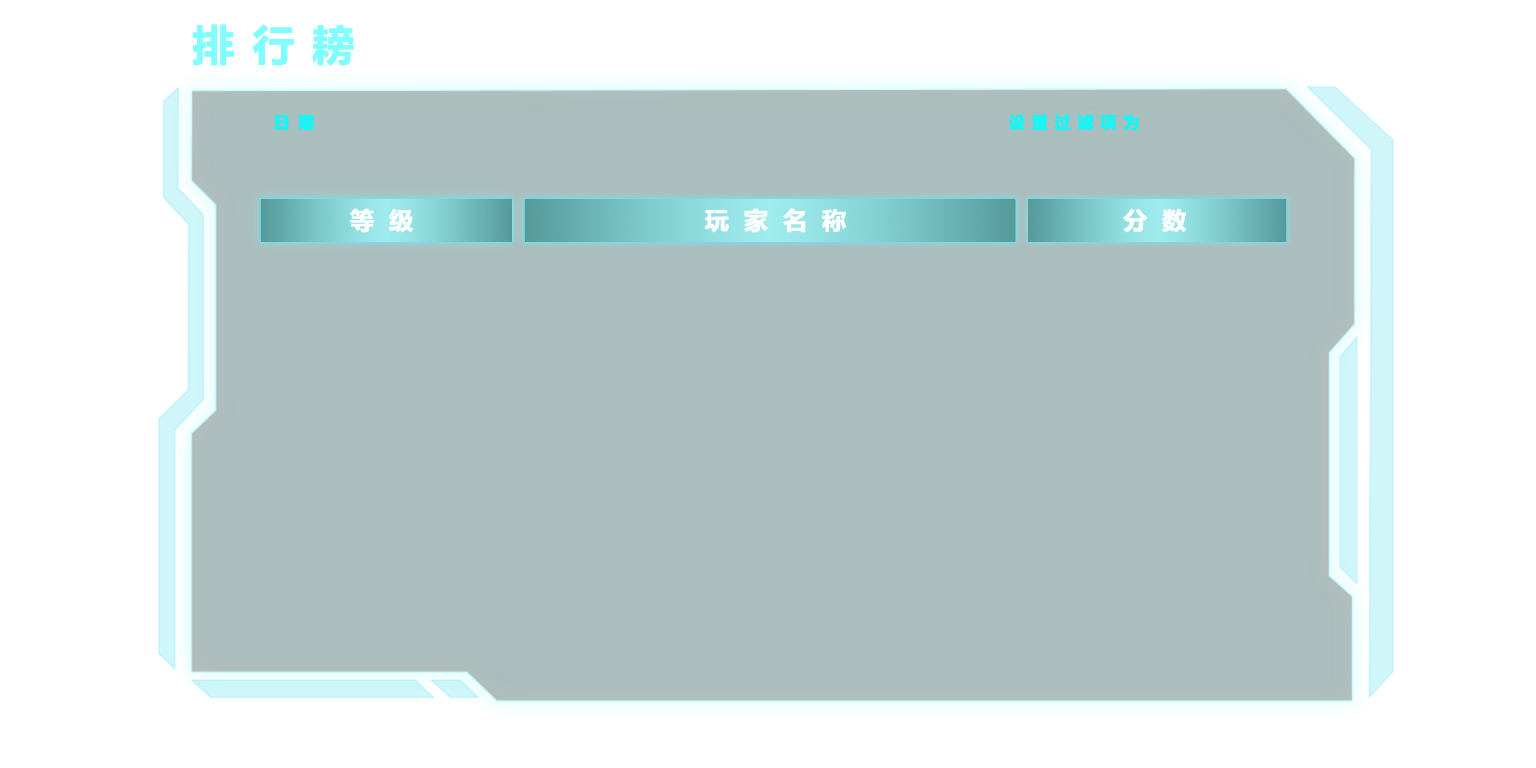
<style>
.page{position:relative;width:1536px;height:768px;background:#aabebd}
.page>*{position:absolute;margin:0}
.t1{font:42px "MicrosoftYaHei-Bold";letter-spacing:0.4em;color:#7fffff;font-weight:bold}
.t2{font:16px "MicrosoftYaHei-Bold";letter-spacing:0.5em;color:#00ffff;font-weight:bold}
.t3{font:16px "MicrosoftYaHei-Bold";letter-spacing:0.4em;color:#00ffff;font-weight:bold}
.t4{font:24px "MicrosoftYaHei-Bold";letter-spacing:0.6em;color:#ffffff;font-weight:bold}
</style>
<div class="page">
<p class="t1" style="left:192px;top:24px;width:162px;height:42px">排行耪</p>
<p class="t2" style="left:275px;top:114px;width:39px;height:17px">日期</p>
<p class="t3" style="left:1009px;top:114px;width:130px;height:17px">设置过滤项为</p>
<p class="t4" style="left:350px;top:208px;width:64px;height:25px">等级</p>
<p class="t4" style="left:704px;top:208px;width:142px;height:25px">玩家名称</p>
<p class="t4" style="left:1123px;top:208px;width:64px;height:25px">分数</p>
</div>
